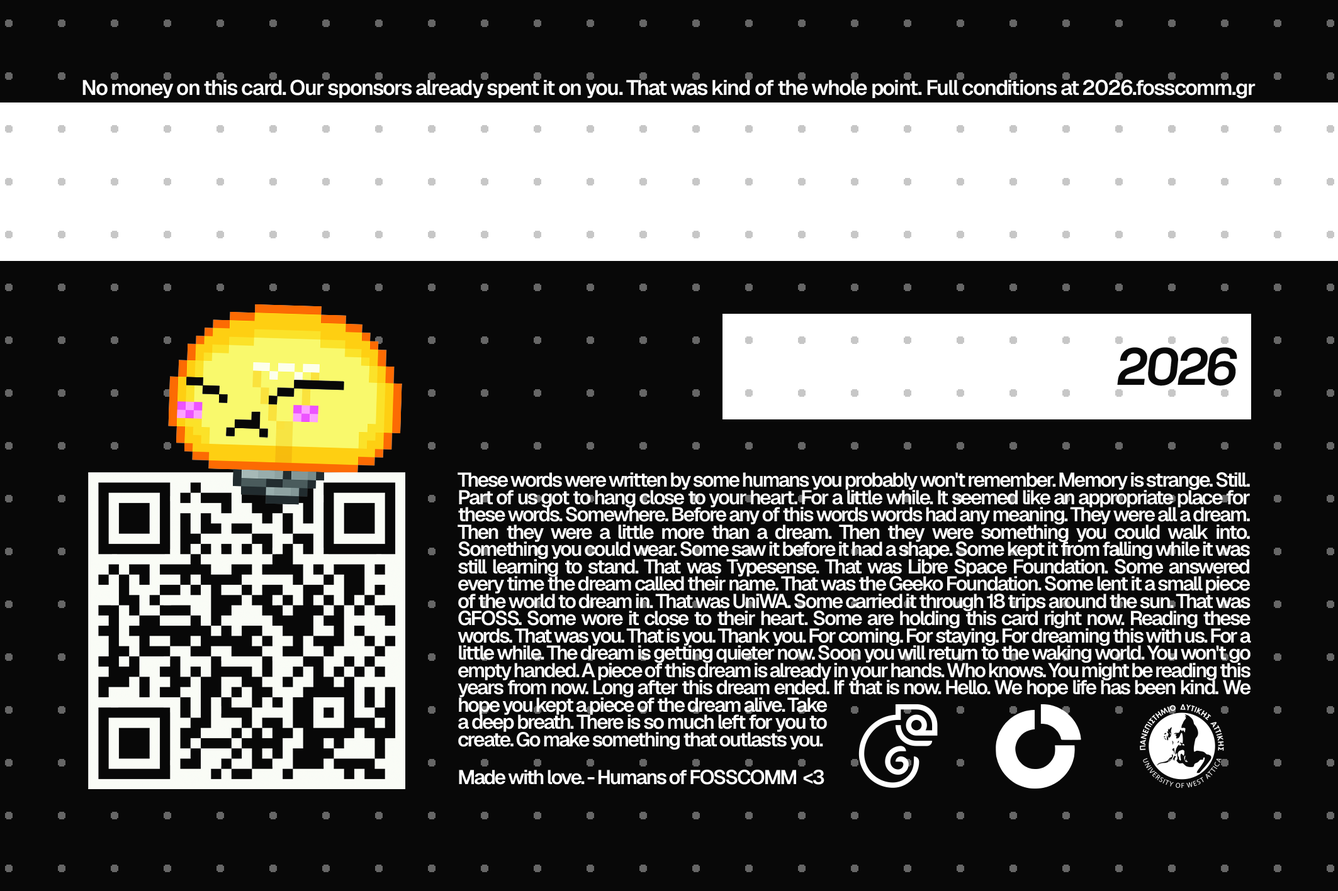
<style>
.page{position:relative;width:1338px;height:891px;background:#080808}
.page>*{position:absolute;margin:0}
.t1{font:21px "Geist-SemiBold";letter-spacing:-0.05em;color:#ffffff}
.t2{font:52.7px "SpaceGrotesk-Bold";letter-spacing:-0.05em;color:#080808}
.t3{font:19.9px/17.3px "Geist-SemiBold";letter-spacing:-0.075em;color:#ffffff}
.t4{font:19.9px "Geist-SemiBold";letter-spacing:-0.075em;color:#ffffff}
</style>
<div class="page">
<p class="t1" style="left:82px;top:79px;width:1173px;height:20px">No money on this card. Our sponsors already spent it on you. That was kind of the whole point. Full conditions at 2026.fosscomm.gr</p>
<p class="t2" style="left:1117px;top:347px;width:120px;height:39px">2026</p>
<p class="t3" style="left:457px;top:472px;width:794px;height:279px;text-align:justify">These words were written by some humans you probably won't remember. Memory is strange. Still. Part of us got to hang close to your heart. For a little while. It seemed like an appropriate place for these words. Somewhere. Before any of this words words had any meaning. They were all a dream. Then they were a little more than a dream. Then they were something you could walk into. Something you could wear. Some saw it before it had a shape. Some kept it from falling while it was still learning to stand. That was Typesense. That was Libre Space Foundation. Some answered every time the dream called their name. That was the Geeko Foundation. Some lent it a small piece of the world to dream in. That was UniWA. Some carried it through 18 trips around the sun. That was GFOSS. Some wore it close to their heart. Some are holding this card right now. Reading these words. That was you. That is you. Thank you. For coming. For staying. For dreaming this with us. For a little while. The dream is getting quieter now. Soon you will return to the waking world. You won't go empty handed. A piece of this dream is already in your hands. Who knows. You might be reading this years from now. Long after this dream ended. If that is now. Hello. We hope life has been kind. We hope you kept a piece of the dream alive. Take a deep breath. There is so much left for you to create. Go make something that outlasts you.</p>
<p class="t4" style="left:459px;top:770px;width:365px;height:15px">Made with love. - Humans of FOSSCOMM  &lt;3</p>
</div>
